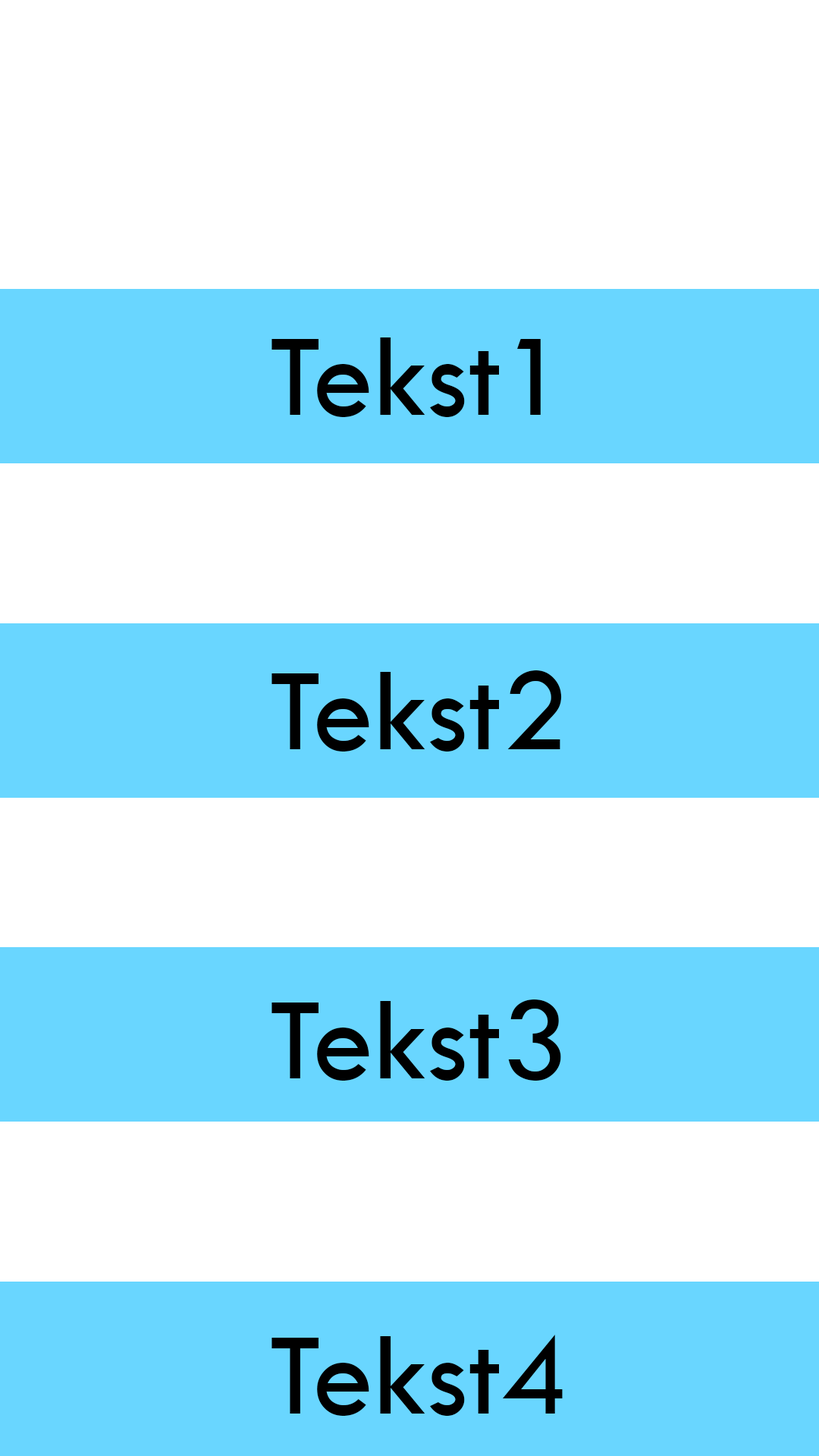
<style>
.page{position:relative;width:819px;height:1456px;background:#ffffff}
.page>*{position:absolute;margin:0}
.t1{font:122.4px "TwCenMT-Regular";color:#000000}
</style>
<div class="page">
<p class="t1" style="left:271px;top:337px;width:270px;height:80px">Tekst1</p>
<p class="t1" style="left:271px;top:670px;width:291px;height:81px">Tekst2</p>
<p class="t1" style="left:271px;top:999px;width:290px;height:82px">Tekst3</p>
<p class="t1" style="left:271px;top:1335px;width:292px;height:81px">Tekst4</p>
</div>
